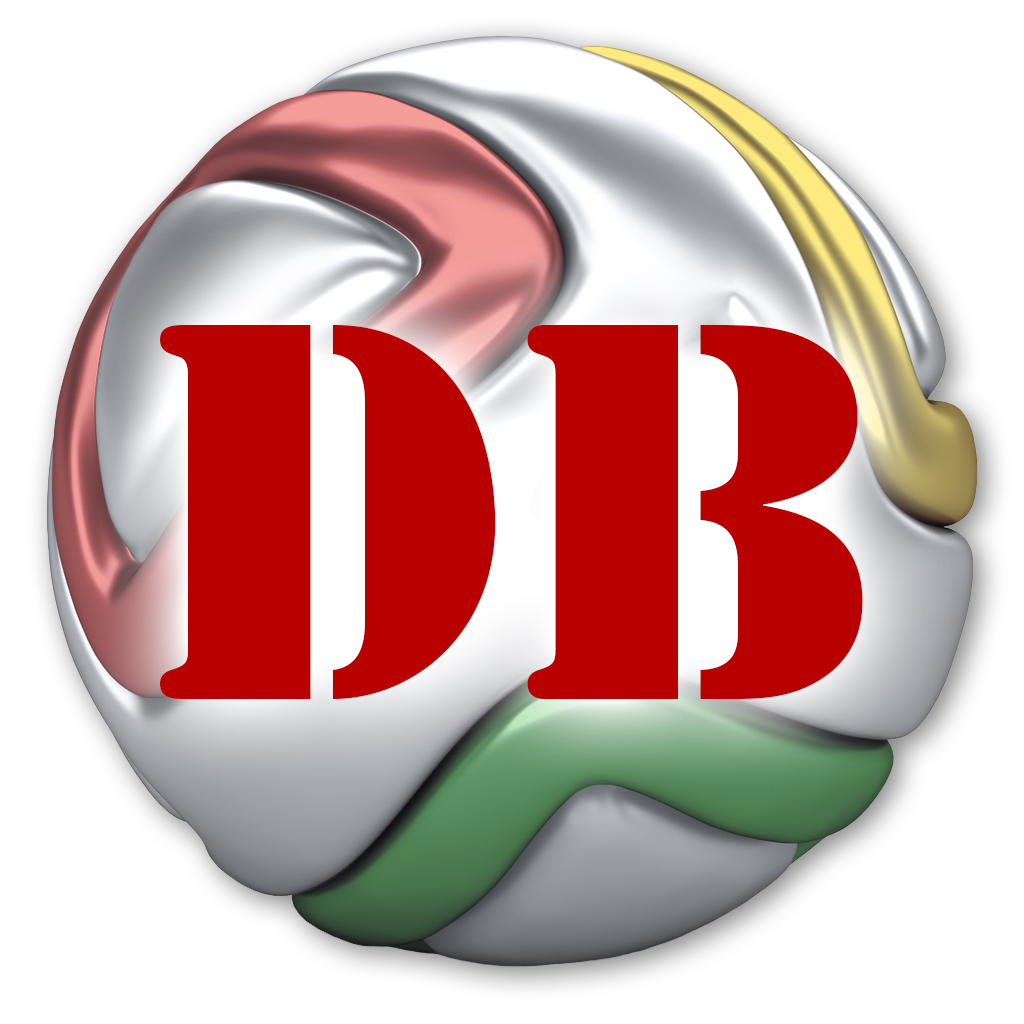
<style>
.page{position:relative;width:1024px;height:1024px;background:#ffffff}
.page>*{position:absolute;margin:0}
.t1{font:500px "StencilStd";color:#b90000}
</style>
<div class="page">
<p class="t1" style="left:160px;top:325px;width:703px;height:375px">DB</p>
</div>
